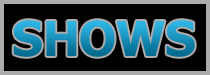
<style>
.page{position:relative;width:210px;height:75px;background:#000000}
.page>*{position:absolute;margin:0}
.t1{font:48px "Tahoma-Bold"}
</style>
<div class="page">
<p class="t1" style="left:13px;top:20px;width:182px;height:37px">SHOWS</p>
</div>
